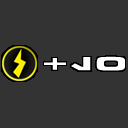
<style>
.page{position:relative;width:128px;height:128px;background:#333333}
.page>*{position:absolute;margin:0}
.t1{font:19.7px "MicrogrammaD-BoldExte";letter-spacing:-0.07em;color:#ffffff;scale:1.7 1}
</style>
<div class="page">
<p class="t1" style="left:44px;top:56px;width:81px;height:15px">+10</p>
</div>
